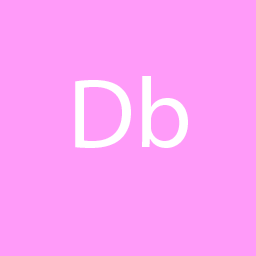
<style>
.page{position:relative;width:256px;height:256px;background:#ff9bf9}
.page>*{position:absolute;margin:0}
.t1{font:100px "MyriadPro-Regular";color:#ffffff}
</style>
<div class="page">
<p class="t1" style="left:75px;top:76px;width:113px;height:72px">Db</p>
</div>
